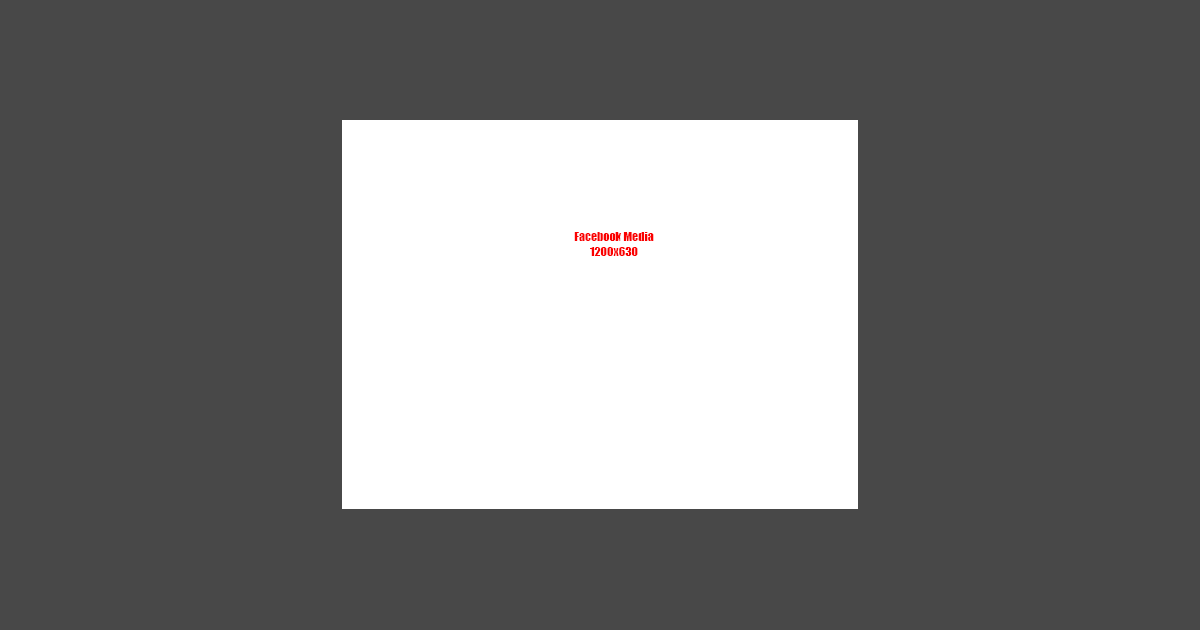
<style>
.page{position:relative;width:1200px;height:630px;background:#484848}
.page>*{position:absolute;margin:0}
.t1{font:12px "Impact";color:#fa0000}
</style>
<div class="page">
<p class="t1" style="left:574px;top:232px;width:80px;height:24px;text-align:center">Facebook Media<br>1200x630</p>
</div>
